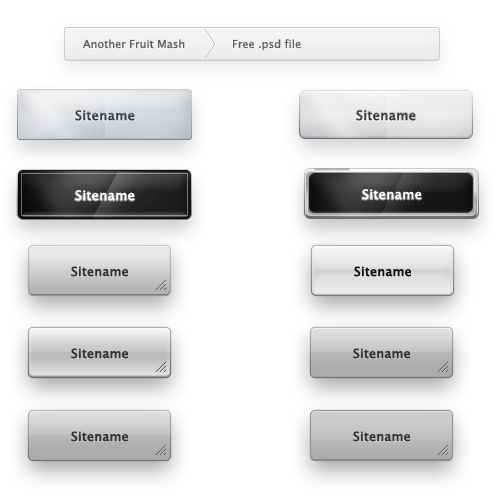
<style>
.page{position:relative;width:500px;height:500px;background:#ffffff}
.page>*{position:absolute;margin:0}
.t1{font:11px "LucidaGrande";color:#5d5d5e}
.t2{font:13px "LucidaGrande";color:#3d3d3f;font-weight:bold}
.t3{font:13px "LucidaGrande";color:#ffffff;font-weight:bold}
.t4{font:12.5px "LucidaGrande";color:#333333;font-weight:bold}
.t5{font:12.5px "LucidaGrande";color:#111111;font-weight:bold}
</style>
<div class="page">
<p class="t1" style="left:83px;top:39px;width:102px;height:10px">Another Fruit Mash</p>
<p class="t1" style="left:233px;top:39px;width:68px;height:12px">Free .psd file</p>
<p class="t2" style="left:75px;top:110px;width:60px;height:11px">Sitename</p>
<p class="t2" style="left:356px;top:110px;width:60px;height:11px">Sitename</p>
<p class="t3" style="left:75px;top:190px;width:60px;height:11px">Sitename</p>
<p class="t3" style="left:362px;top:189px;width:60px;height:11px">Sitename</p>
<p class="t4" style="left:71px;top:266px;width:57px;height:11px">Sitename</p>
<p class="t5" style="left:354px;top:266px;width:57px;height:11px">Sitename</p>
<p class="t4" style="left:71px;top:348px;width:57px;height:11px">Sitename</p>
<p class="t4" style="left:353px;top:348px;width:57px;height:11px">Sitename</p>
<p class="t4" style="left:71px;top:431px;width:57px;height:11px">Sitename</p>
<p class="t4" style="left:353px;top:431px;width:57px;height:11px">Sitename</p>
</div>
